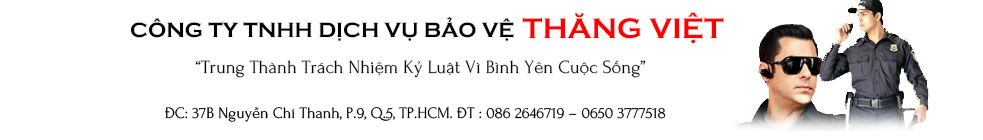
<style>
.page{position:relative;width:983px;height:140px;background:#ffffff}
.page>*{position:absolute;margin:0}
.t1{font:21.3px "UTMCopperplateBold";color:#000305}
.t2{font:29.3px "UTMCopperplateBold";color:#ff0000}
.t3{font:18.7px "UTM-Forum";color:#000406}
.t4{font:16px "UTM-Forum";color:#000305}
</style>
<div class="page">
<p class="t1" style="left:131px;top:17px;width:383px;height:24px">CÔNG TY TNHH DỊCH VỤ BẢO VỆ</p>
<p class="t2" style="left:522px;top:12px;width:202px;height:32px">THĂNG VIỆT</p>
<p class="t3" style="left:195px;top:60px;width:451px;height:18px">“Trung Thành Trách Nhiệm Kỷ Luật Vì Bình Yên Cuộc Sống”</p>
<p class="t4" style="left:164px;top:107px;width:502px;height:15px">ĐC: 37B Nguyễn Chí Thanh, P.9, Q.5, TP.HCM. ĐT : 086 2646719 – 0650 3777518</p>
</div>
